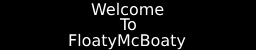
<style>
.page{position:relative;width:256px;height:50px;background:#000000}
.page>*{position:absolute;margin:0}
.t1{font:16px "DejaVuSans";color:#ffffff}
</style>
<div class="page">
<p class="t1" style="left:91px;top:2px;width:73px;height:14px">Welcome</p>
<p class="t1" style="left:119px;top:18px;width:17px;height:13px">To</p>
<p class="t1" style="left:69px;top:33px;width:117px;height:17px">FloatyMcBoaty</p>
</div>
